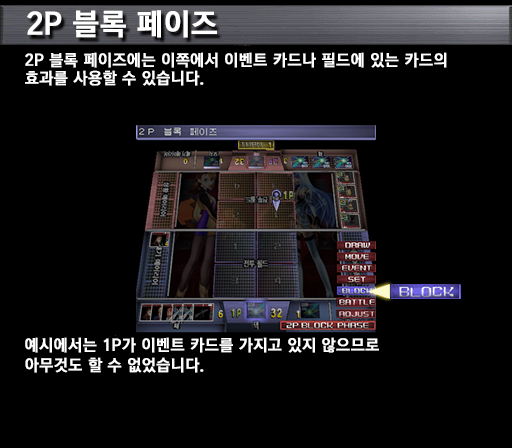
<style>
.page{position:relative;width:512px;height:448px;background:#000000}
.page>*{position:absolute;margin:0}
.t1{font:30px "KoreanGD15-R";color:#ffffff;font-weight:bold}
.t2{font:16px/18px "KoreanGD15-R";color:#ffffff;font-weight:bold}
.t3{font:16px/20px "KoreanGD15-R";color:#ffffff;font-weight:bold}
</style>
<div class="page">
<p class="t1" style="left:27px;top:10px;width:190px;height:28px">2P 블록 페이즈</p>
<p class="t2" style="left:25px;top:52px;width:422px;height:34px">2P 블록 페이즈에는 이쪽에서 이벤트 카드나 필드에 있는 카드의<br>효과를 사용할 수 있습니다.</p>
<p class="t3" style="left:25px;top:337px;width:354px;height:36px">예시에서는 1P가 이벤트 카드를 가지고 있지 않으므로<br>아무것도 할 수 없었습니다.</p>
</div>
